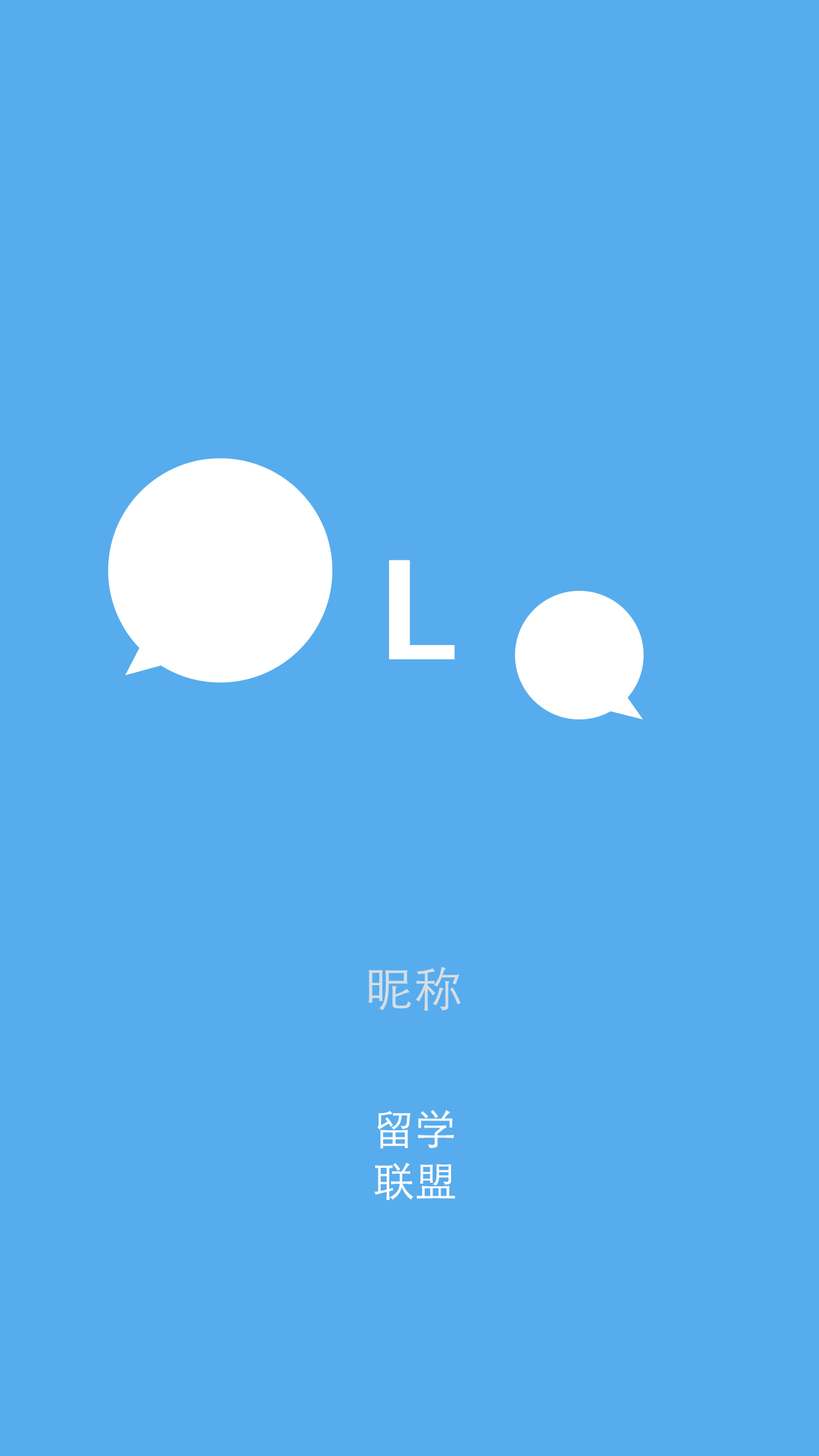
<style>
.page{position:relative;width:819px;height:1456px;background:#57aced}
.page>*{position:absolute;margin:0}
.t1{font:136.9px "LucidaGrande-Bold";letter-spacing:0.02em;color:#ffffff}
.t2{font:47.5px "STHeitiSC-Light";letter-spacing:0.02em;color:#d4dee5}
.t3{font:41.2px "STHeitiSC-Light";letter-spacing:0.02em;color:#ffffff}
</style>
<div class="page">
<p class="t1" style="left:389px;top:560px;width:66px;height:99px">L</p>
<p class="t2" style="left:369px;top:967px;width:92px;height:44px">昵称</p>
<p class="t3" style="left:377px;top:1110px;width:77px;height:39px">留学</p>
<p class="t3" style="left:375px;top:1163px;width:80px;height:37px">联盟</p>
</div>
